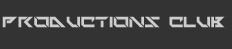
<style>
.page{position:relative;width:232px;height:49px;background:#333333}
.page>*{position:absolute;margin:0}
.t1{font:21px "TechnoHideo";color:#cdcdcd;text-transform:uppercase}
</style>
<div class="page">
<p class="t1" style="left:2px;top:16px;width:223px;height:12px">PRODUCTIONS CLUB</p>
</div>
